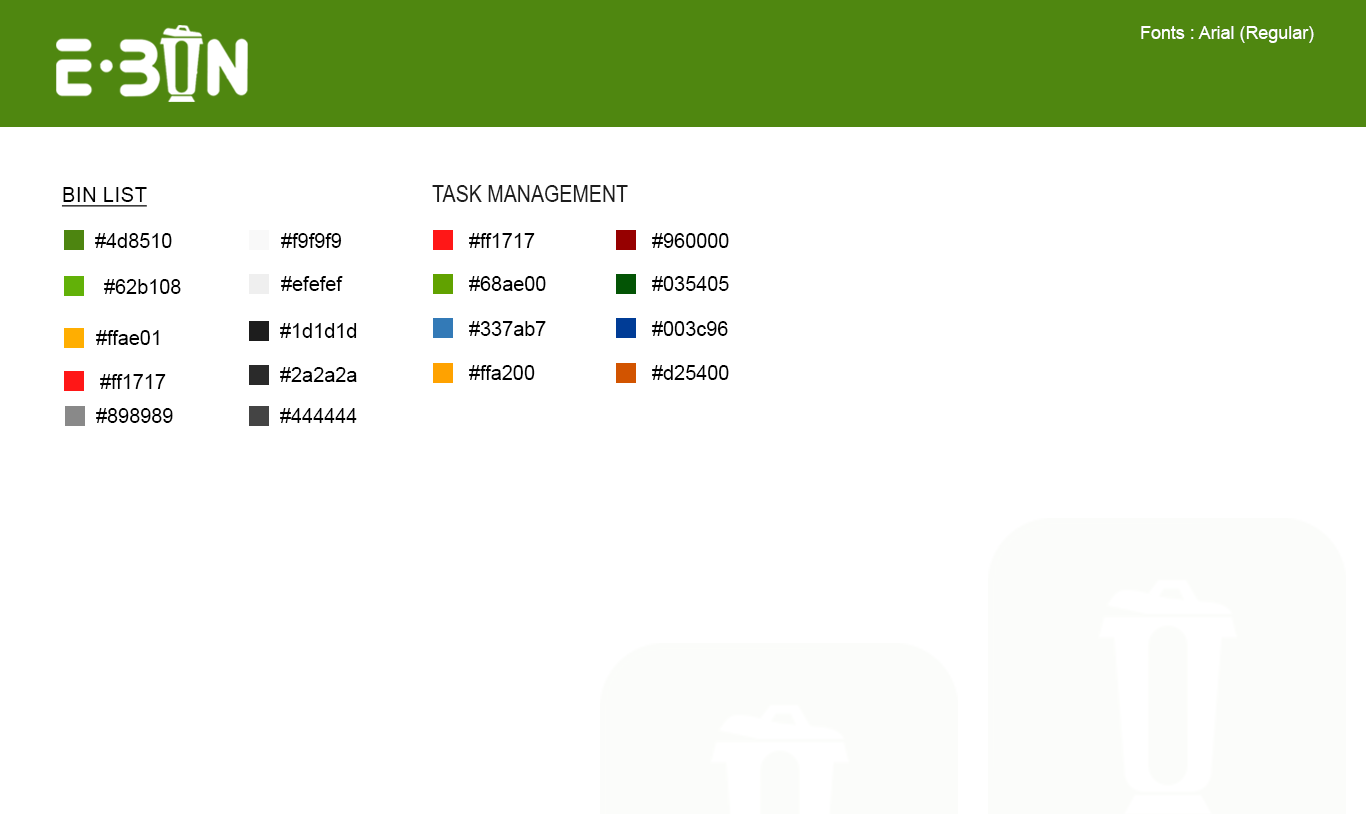
<style>
.page{position:relative;width:1366px;height:814px;background:#ffffff}
.page>*{position:absolute;margin:0}
.t1{font:18px "ArialMT";color:#ffffff}
.t2{font:24.1px "ArialNarrow";color:#1d1d1d;text-transform:uppercase}
.t3{font:20px "ArialMT";color:#000000;text-transform:uppercase;text-decoration:underline}
.t4{font:20px "ArialMT";color:#000000}
</style>
<div class="page">
<p class="t1" style="left:1141px;top:26px;width:173px;height:17px">Fonts : Arial (Regular)</p>
<p class="t2" style="left:432px;top:185px;width:196px;height:17px">task management</p>
<p class="t3" style="left:61px;top:187px;width:86px;height:20px">BIN LIST</p>
<p class="t4" style="left:95px;top:233px;width:77px;height:15px">#4d8510</p>
<p class="t4" style="left:281px;top:233px;width:61px;height:15px">#f9f9f9</p>
<p class="t4" style="left:469px;top:233px;width:66px;height:15px">#ff1717</p>
<p class="t4" style="left:652px;top:233px;width:77px;height:15px">#960000</p>
<p class="t4" style="left:104px;top:279px;width:77px;height:15px">#62b108</p>
<p class="t4" style="left:281px;top:276px;width:62px;height:15px">#efefef</p>
<p class="t4" style="left:469px;top:276px;width:77px;height:15px">#68ae00</p>
<p class="t4" style="left:652px;top:276px;width:77px;height:15px">#035405</p>
<p class="t4" style="left:280px;top:323px;width:77px;height:15px">#1d1d1d</p>
<p class="t4" style="left:469px;top:321px;width:77px;height:15px">#337ab7</p>
<p class="t4" style="left:652px;top:321px;width:76px;height:15px">#003c96</p>
<p class="t4" style="left:96px;top:330px;width:63px;height:15px">#ffae01</p>
<p class="t4" style="left:469px;top:365px;width:66px;height:15px">#ffa200</p>
<p class="t4" style="left:652px;top:365px;width:77px;height:15px">#d25400</p>
<p class="t4" style="left:100px;top:374px;width:66px;height:15px">#ff1717</p>
<p class="t4" style="left:280px;top:367px;width:77px;height:15px">#2a2a2a</p>
<p class="t4" style="left:96px;top:408px;width:77px;height:15px">#898989</p>
<p class="t4" style="left:280px;top:408px;width:77px;height:15px">#444444</p>
</div>
